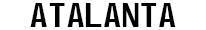
<style>
.page{position:relative;width:206px;height:30px;background:#ffffff}
.page>*{position:absolute;margin:0}
.t1{font:30px "Unispace-Bold";color:#000000}
</style>
<div class="page">
<p class="t1" style="left:30px;top:3px;width:146px;height:24px">ATALANTA</p>
</div>
